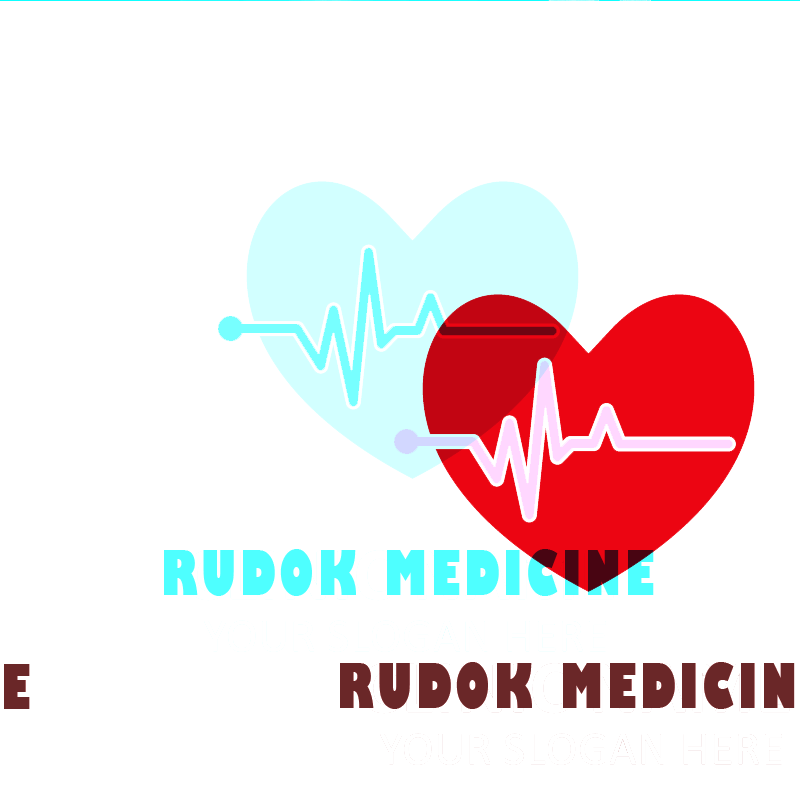
<style>
.page{position:relative;width:800px;height:800px;background:#ffffff}
.page>*{position:absolute;margin:0}
.t1{font:60px "GillSans-UltraBoldCondensed";letter-spacing:0.06em;color:#4effff;text-transform:uppercase}
</style>
<div class="page">
<p class="t1" style="left:164px;top:548px;width:490px;height:47px">rudok medicine</p>
</div>
